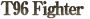
<style>
.page{position:relative;width:90px;height:19px;background:#ffffff}
.page>*{position:absolute;margin:0}
.t1{font:18px "RyuminPro-ExBold";letter-spacing:-0.08em;color:#4a3f32;font-weight:bold;scale:0.9 1}
</style>
<div class="page">
<p class="t1" style="left:0px;top:1px;width:84px;height:18px">T96 Fighter</p>
</div>
